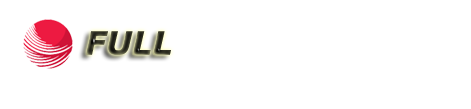
<style>
.page{position:relative;width:471px;height:109px;background:#ffffff}
.page>*{position:absolute;margin:0}
.t1{font:32px "Verdana-BoldItalic"}
</style>
<div class="page">
<p class="t1" style="left:85px;top:31px;width:86px;height:24px">FULL</p>
</div>
